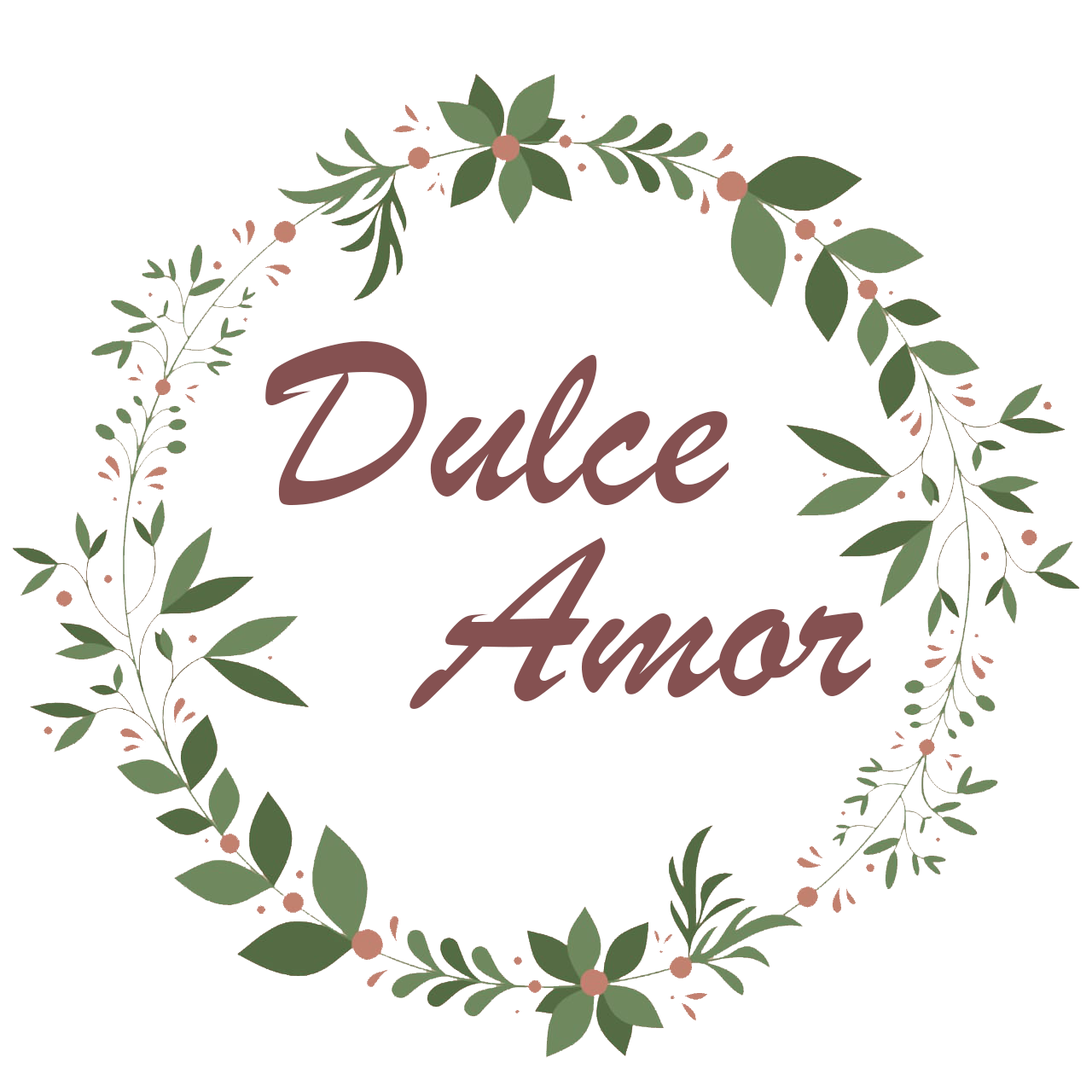
<style>
.page{position:relative;width:1092px;height:1092px;background:#ffffff}
.page>*{position:absolute;margin:0}
.t1{font:247.4px/196.2px "BrushScriptMT";color:#855151}
</style>
<div class="page">
<p class="t1" style="left:265px;top:341px;width:606px;height:368px">Dulce<br> Amor</p>
</div>
